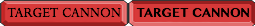
<style>
.page{position:relative;width:255px;height:26px;background:#d83939}
.page>*{position:absolute;margin:0}
.t1{font:15px "Perpetua";color:#000000}
.t2{font:12px "MyanmarMN-Bold";color:#000000}
</style>
<div class="page">
<p class="t1" style="left:7px;top:7px;width:114px;height:11px">TARGET CANNON</p>
<p class="t2" style="left:136px;top:7px;width:113px;height:11px">TARGET CANNON</p>
</div>
